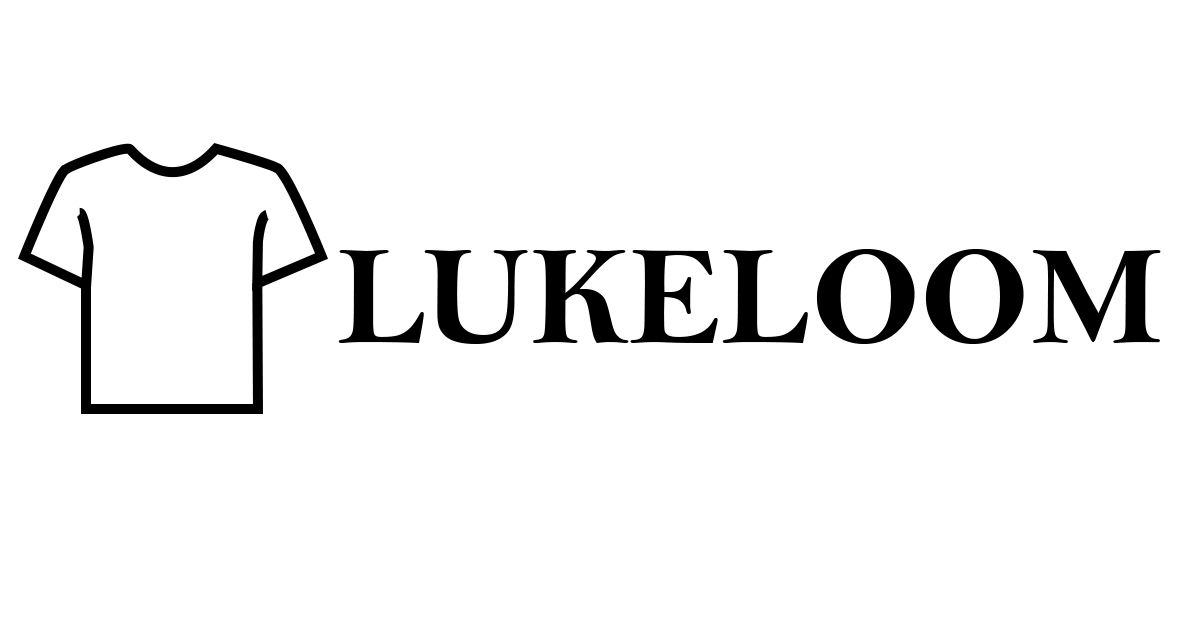
<style>
.page{position:relative;width:1200px;height:630px;background:#ffffff}
.page>*{position:absolute;margin:0}
.t1{font:141.5px "BellMTBold";color:#000000}
</style>
<div class="page">
<p class="t1" style="left:338px;top:249px;width:823px;height:95px">LUKELOOM</p>
</div>
